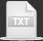
<style>
.page{position:relative;width:43px;height:41px;background:#333333}
.page>*{position:absolute;margin:0}
.t1{font:9px "Arial-BoldMT";color:#ffffff}
</style>
<div class="page">
<p class="t1" style="left:12px;top:18px;width:18px;height:7px">TXT</p>
</div>
